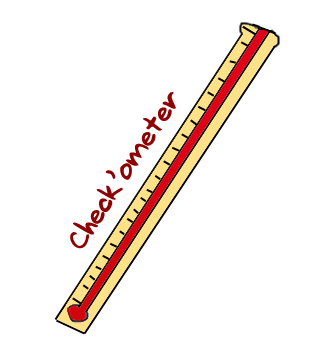
<style>
.page{position:relative;width:309px;height:347px;background:#ffffff}
.page>*{position:absolute;margin:0}
.t1{font:30px "RaysHand-Plain";letter-spacing:-0.009em;color:#8d0303}
</style>
<div class="page">
<p class="t1" style="left:70px;top:92px;width:106px;height:157px;rotate:-57deg">Check’ometer</p>
</div>
